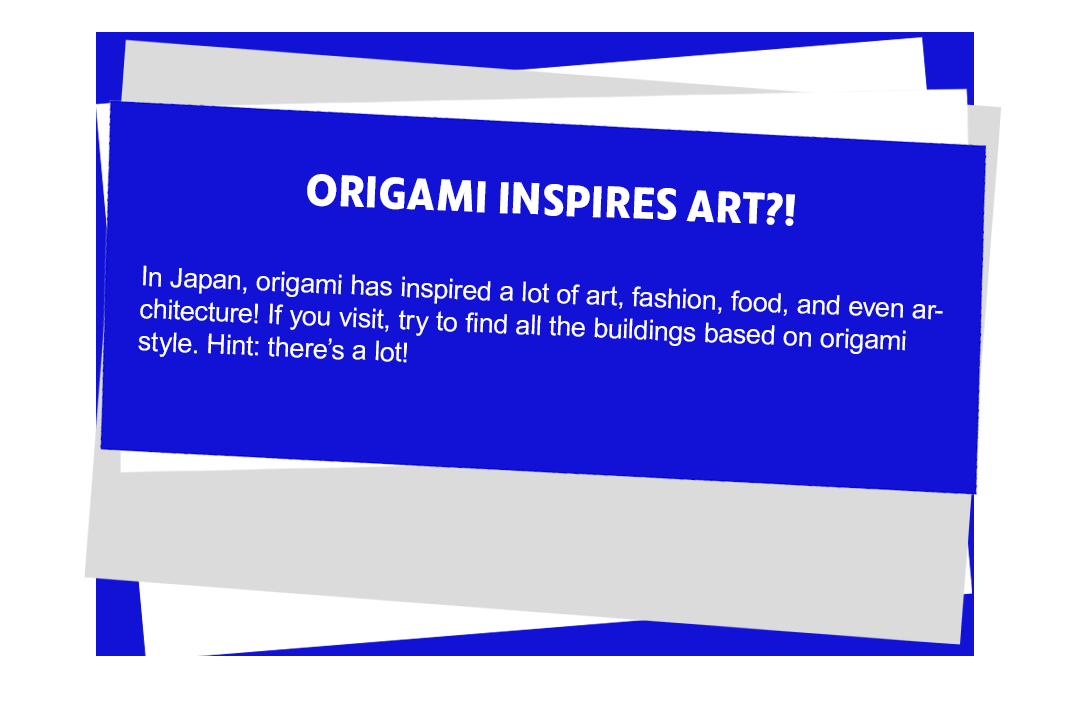
<style>
.page{position:relative;width:1082px;height:710px;background:#1212d7}
.page>*{position:absolute;margin:0}
.t1{font:27.1px "ArialMT";letter-spacing:-0.005em;color:#ffffff}
.t2{font:45.9px "RuckSack-Bold";color:#ffffff;text-transform:uppercase}
</style>
<div class="page">
<p class="t1" style="left:138px;top:174px;width:805px;height:189px;text-align:center;rotate:2deg"><span class="t2">ORIGAMI INSPIRES ART?!<br><br></span>In Japan, origami has inspired a lot of art, fashion, food, and even architecture! If you visit, try to find all the buildings based on origami style. Hint: there’s a lot!</p>
</div>
